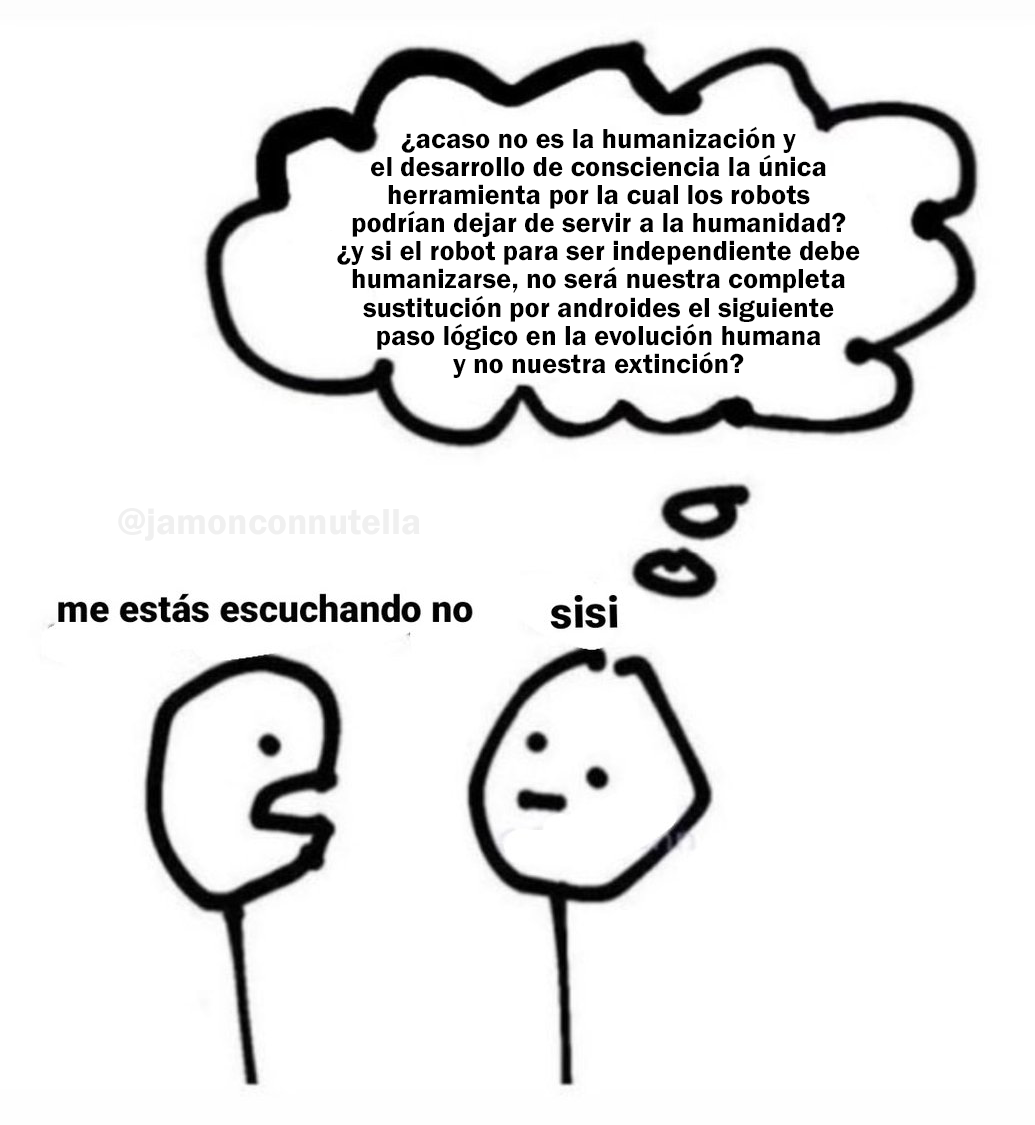
<style>
.page{position:relative;width:1035px;height:1125px;background:#ffffff}
.page>*{position:absolute;margin:0}
.t1{font:28.6px "FranklinGothic-Demi";color:#000000}
.t2{font:37.5px "FranklinGothic-Demi";color:#f0f0f0}
</style>
<div class="page">
<p class="t1" style="left:337px;top:126px;width:523px;height:252px;text-align:center">¿acaso no es la humanización y<br>el desarrollo de consciencia la única<br>herramienta por la cual los robots<br>podrían dejar de servir a la humanidad?<br>¿y si el robot para ser independiente debe<br>humanizarse, no será nuestra completa<br>sustitución por androides el siguiente<br>paso lógico en la evolución humana<br>y no nuestra extinción?</p>
<p class="t2" style="left:118px;top:508px;width:302px;height:33px">@jamonconnutella</p>
</div>
